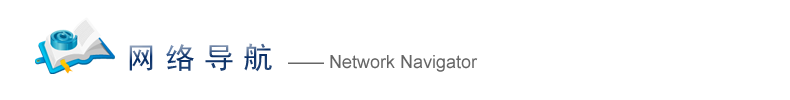
<style>
.page{position:relative;width:790px;height:100px;background:#ffffff}
.page>*{position:absolute;margin:0}
.t1{font:30px "SimHei";letter-spacing:0.3em}
.t2{font:18px "ArialMT";color:#666666}
</style>
<div class="page">
<p class="t1" style="left:129px;top:43px;width:143px;height:29px">网络导航</p>
<p class="t2" style="left:288px;top:55px;width:190px;height:17px">—— Network Navigator</p>
</div>
